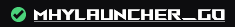
<style>
.page{position:relative;width:235px;height:27px;background:#0d0d0f}
.page>*{position:absolute;margin:0}
.t1{font:24px "ROGFontsv1.6-Regular";color:#ffffff}
</style>
<div class="page">
<p class="t1" style="left:34px;top:9px;width:191px;height:11px">MHYLAUNCHER_GO</p>
</div>
